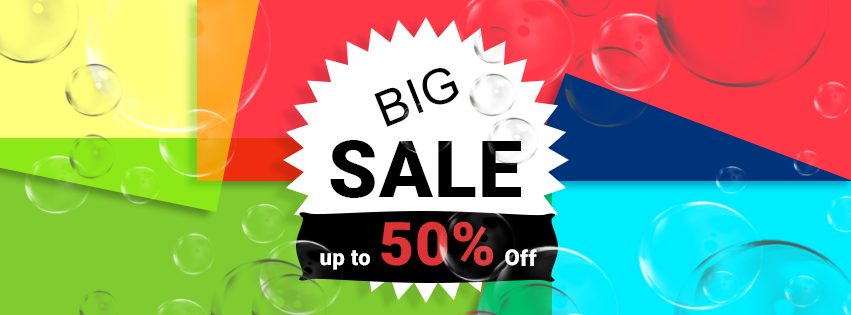
<style>
.page{position:relative;width:851px;height:315px}
.page>*{position:absolute;margin:0}
.t1{font:49px "ArialMT";letter-spacing:0.015em;color:#000000}
.t2{font:79px "Roboto-Black";letter-spacing:0.015em;color:#000000}
.t3{font:22px "Roboto-Black";letter-spacing:0.015em;color:#ffffff}
.t4{font:60px "Roboto-Black";letter-spacing:0.015em;color:#dc3434}
</style>
<div class="page">
<p class="t1" style="left:374px;top:68px;width:85px;height:59px;rotate:-22deg">BIG</p>
<p class="t2" style="left:330px;top:140px;width:191px;height:58px">SALE</p>
<p class="t3" style="left:320px;top:221px;width:217px;height:49px">up to <span class="t4">50% </span>Off</p>
</div>
